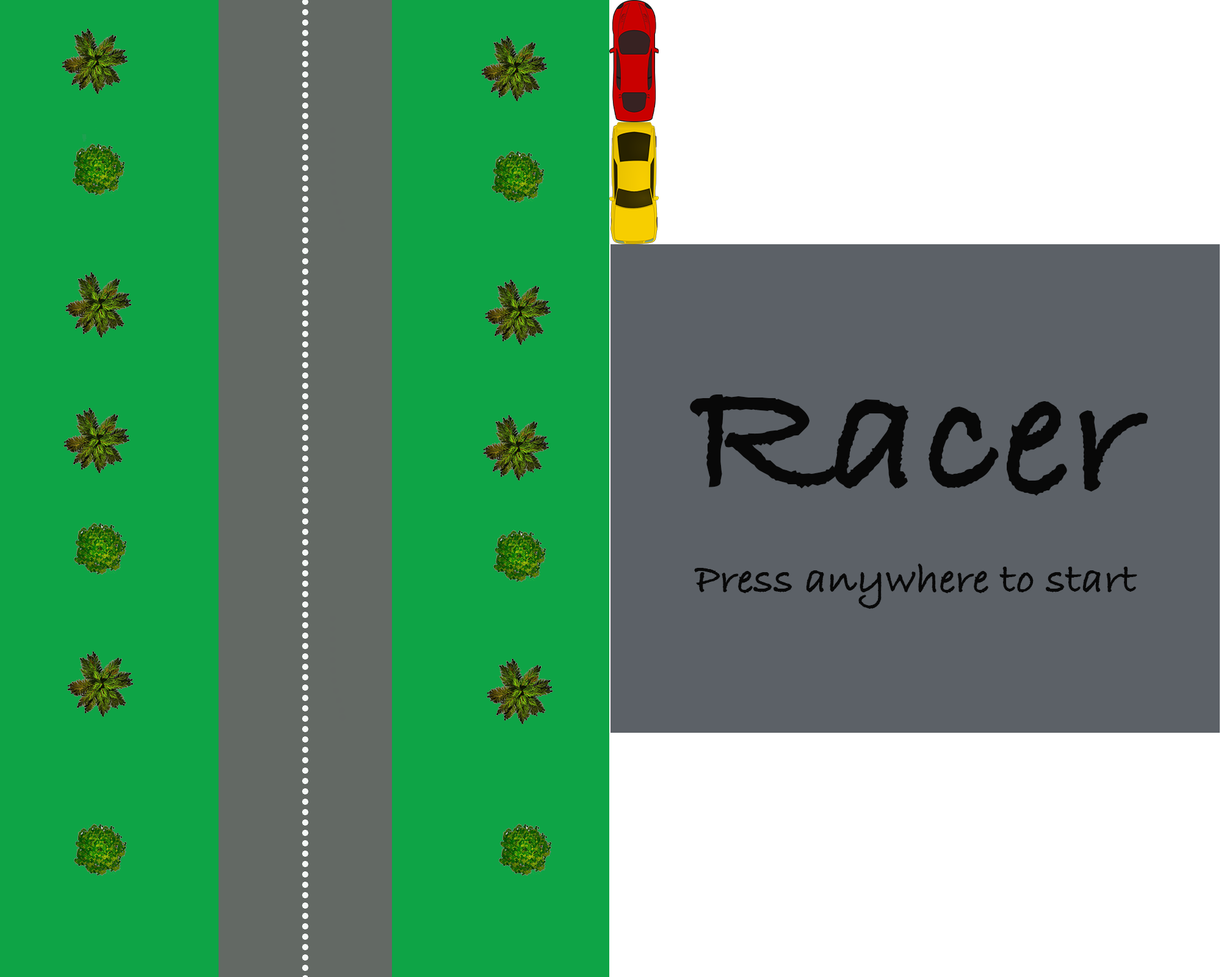
<style>
.page{position:relative;width:1221px;height:977px;background:#0ea446}
.page>*{position:absolute;margin:0}
.t1{font:183.1px "BradleyHandITCTT-Bold";color:#080808}
.t2{font:44px "BradleyHandITCTT-Bold";color:#080808}
</style>
<div class="page">
<p class="t1" style="left:690px;top:394px;width:458px;height:102px">Racer</p>
<p class="t2" style="left:694px;top:563px;width:443px;height:46px">Press anywhere to start</p>
</div>
